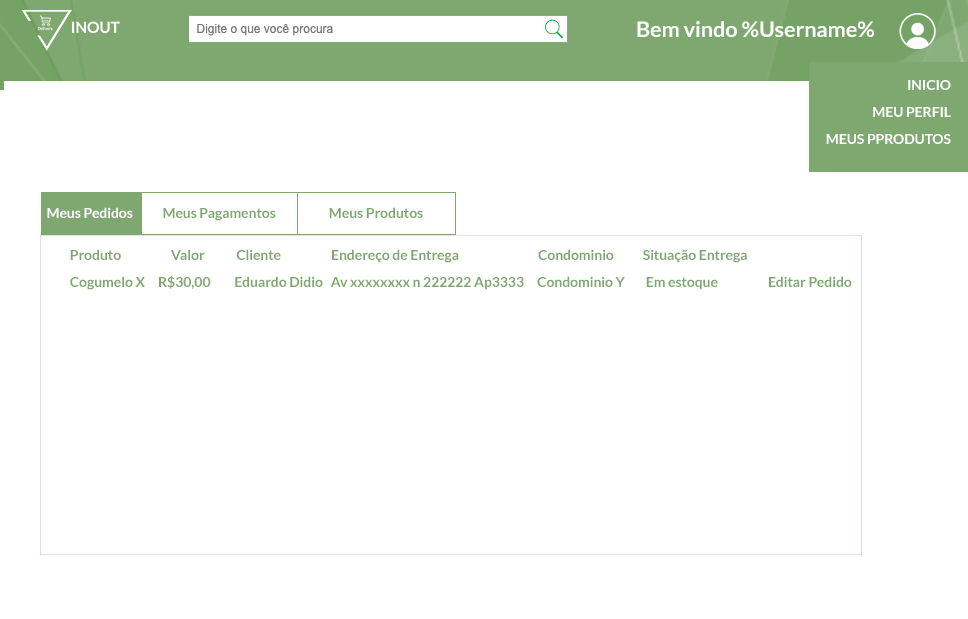
<style>
.page{position:relative;width:968px;height:619px;background:#ffffff}
.page>*{position:absolute;margin:0}
.t1{font:21.7px "Lato-Bold";letter-spacing:-0.005em;color:#ffffff}
.t2{font:14px/27px "Lato-Bold";letter-spacing:-0.005em;color:#ffffff}
.t3{font:14px "Lato-Bold";letter-spacing:-0.005em;color:#ffffff}
.t4{font:14px "Lato-Bold";letter-spacing:-0.005em;color:#7ea86f}
.t5{font:14px/27px "Lato-Bold";letter-spacing:-0.005em;color:#7ea86f}
</style>
<div class="page">
<p class="t1" style="left:637px;top:21px;width:237px;height:16px">Bem vindo %Username%</p>
<p class="t2" style="left:826px;top:80px;width:125px;height:64px;text-align:right">INICIO <br>MEU PERFIL<br>MEUS PPRODUTOS</p>
<p class="t3" style="left:47px;top:207px;width:86px;height:11px">Meus Pedidos</p>
<p class="t4" style="left:163px;top:208px;width:113px;height:13px">Meus Pagamentos</p>
<p class="t4" style="left:329px;top:207px;width:94px;height:11px">Meus Produtos</p>
<p class="t5" style="left:70px;top:249px;width:782px;height:41px">Produto                   Valor            Cliente                   Endereço de Entrega                              Condominio           Situação Entrega<br>Cogumelo X     R$30,00         Eduardo Didio   Av xxxxxxxx n 222222 Ap3333     Condominio Y        Em estoque                   Editar Pedido</p>
</div>
